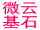
<style>
.page{position:relative;width:40px;height:30px;background:#ffffff}
.page>*{position:absolute;margin:0}
.t1{font:14.2px "SimHei";color:#ff005b;scale:1.28 1}
</style>
<div class="page">
<p class="t1" style="left:2px;top:1px;width:35px;height:14px">微云</p>
<p class="t1" style="left:3px;top:15px;width:34px;height:14px">基石</p>
</div>
